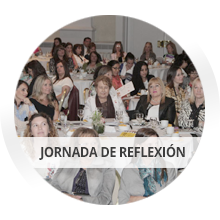
<style>
.page{position:relative;width:220px;height:220px;background:#ffffff}
.page>*{position:absolute;margin:0}
.t1{font:14px "OpenSans-Bold";letter-spacing:-0.025em;color:#3d3d3d;scale:0.9 1}
</style>
<div class="page">
<p class="t1" style="left:39px;top:144px;width:146px;height:16px">JORNADA DE REFLEXIÓN</p>
</div>
